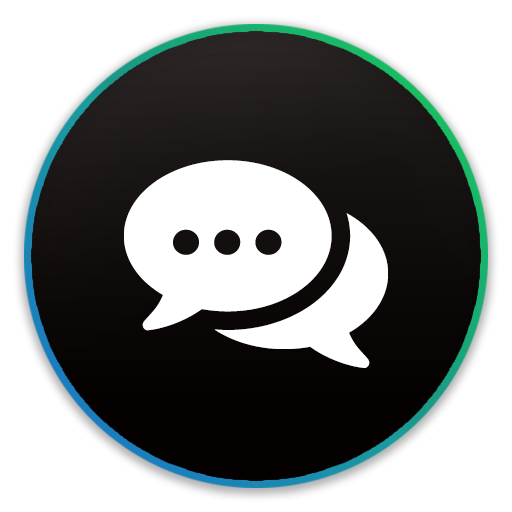
<style>
.page{position:relative;width:512px;height:512px;background:#ffffff}
.page>*{position:absolute;margin:0}
.t1{font:161px "Avenir-Heavy";letter-spacing:-0.04em;color:#130f0e}
</style>
<div class="page">
<p class="t1" style="left:173px;top:229px;width:109px;height:26px">...</p>
</div>
